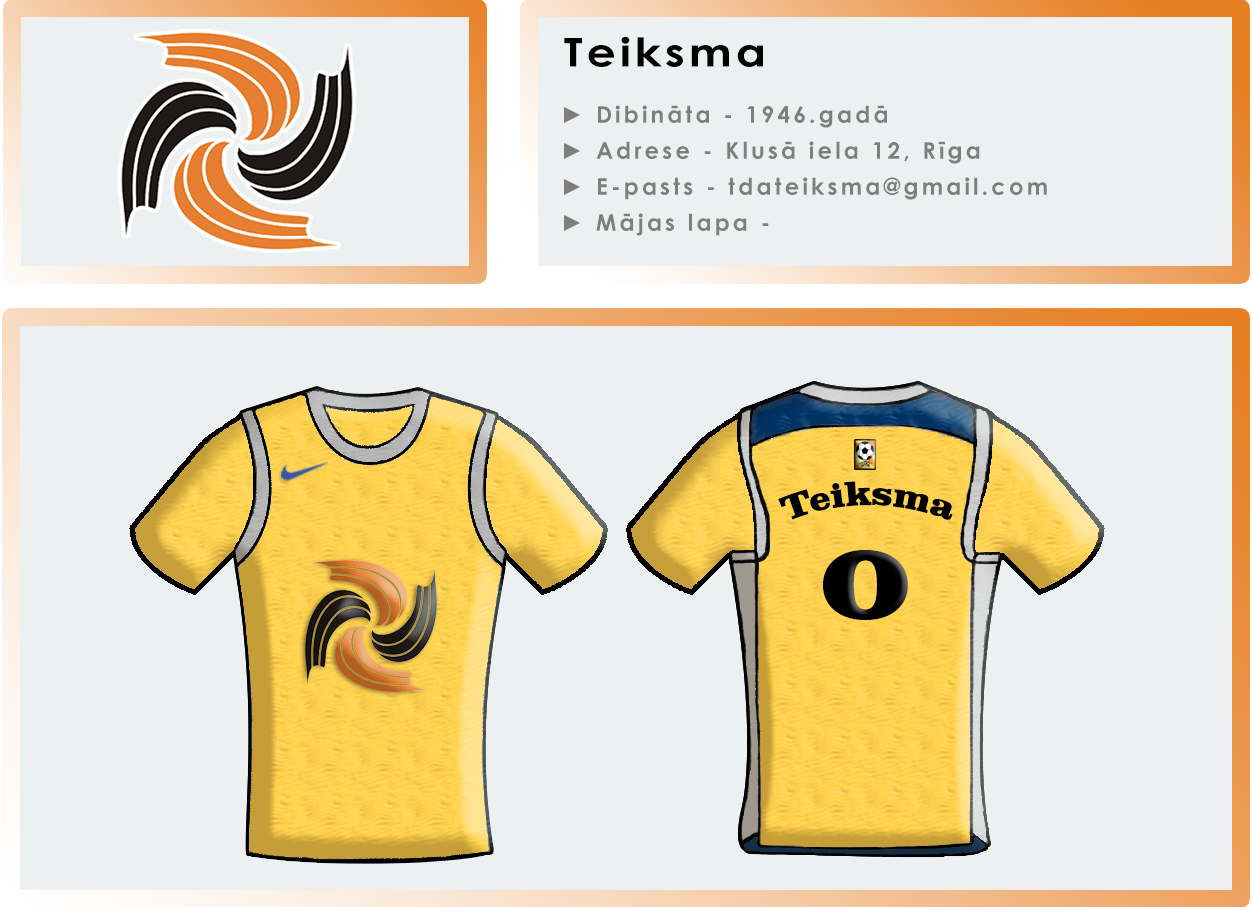
<style>
.page{position:relative;width:1252px;height:907px;background:#ecf0f1}
.page>*{position:absolute;margin:0}
.t1{font:39.7px "CenturyGothic-Bold";letter-spacing:0.08em;color:#000000;scale:1.16 1}
.t2{font:23.1px/36px "CenturyGothic-Bold";letter-spacing:0.14em;color:#7e7e7e}
.t3{font:35px "ClarendonBT-Black";color:#000000}
.t4{font:107.7px "ClarendonBT-Black";color:#000000;scale:1.33 1}
</style>
<div class="page">
<p class="t1" style="left:564px;top:36px;width:199px;height:31px">Teiksma</p>
<p class="t2" style="left:564px;top:105px;width:483px;height:131px">► Dibināta - 1946.gadā<br>► Adrese - Klusā iela 12, Rīga<br>► E-pasts - tdateiksma@gmail.com<br>► Mājas lapa -</p>
<p class="t3" style="left:778px;top:481px;width:175px;height:39px">Teiksma</p>
<p class="t4" style="left:823px;top:550px;width:85px;height:71px">0</p>
</div>
